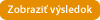
<style>
.page{position:relative;width:100px;height:20px;background:#e68d00}
.page>*{position:absolute;margin:0}
.t1{font:11px "MyriadPro-Semibold";color:#ffffff}
</style>
<div class="page">
<p class="t1" style="left:7px;top:4px;width:86px;height:12px">Zobraziť výsledok</p>
</div>
